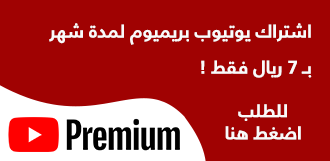
<style>
.page{position:relative;width:330px;height:161px;background:#a00202}
.page>*{position:absolute;margin:0}
.t1{font:18.4px/36px "FrutigerLTArabic-65Bold";color:#fafafa}
.t2{font:18.4px "FrutigerLTArabic-65Bold";color:#fafafa}
</style>
<div class="page">
<p class="t1" style="left:49px;top:23px;width:263px;height:55px">اشتراك يوتيوب بريميوم لمدة شهر<br>بـ 7 ريال فقط !</p>
<p class="t2" style="left:225px;top:104px;width:76px;height:36px;text-align:center">للطلب<br>اضغط هنا</p>
</div>
